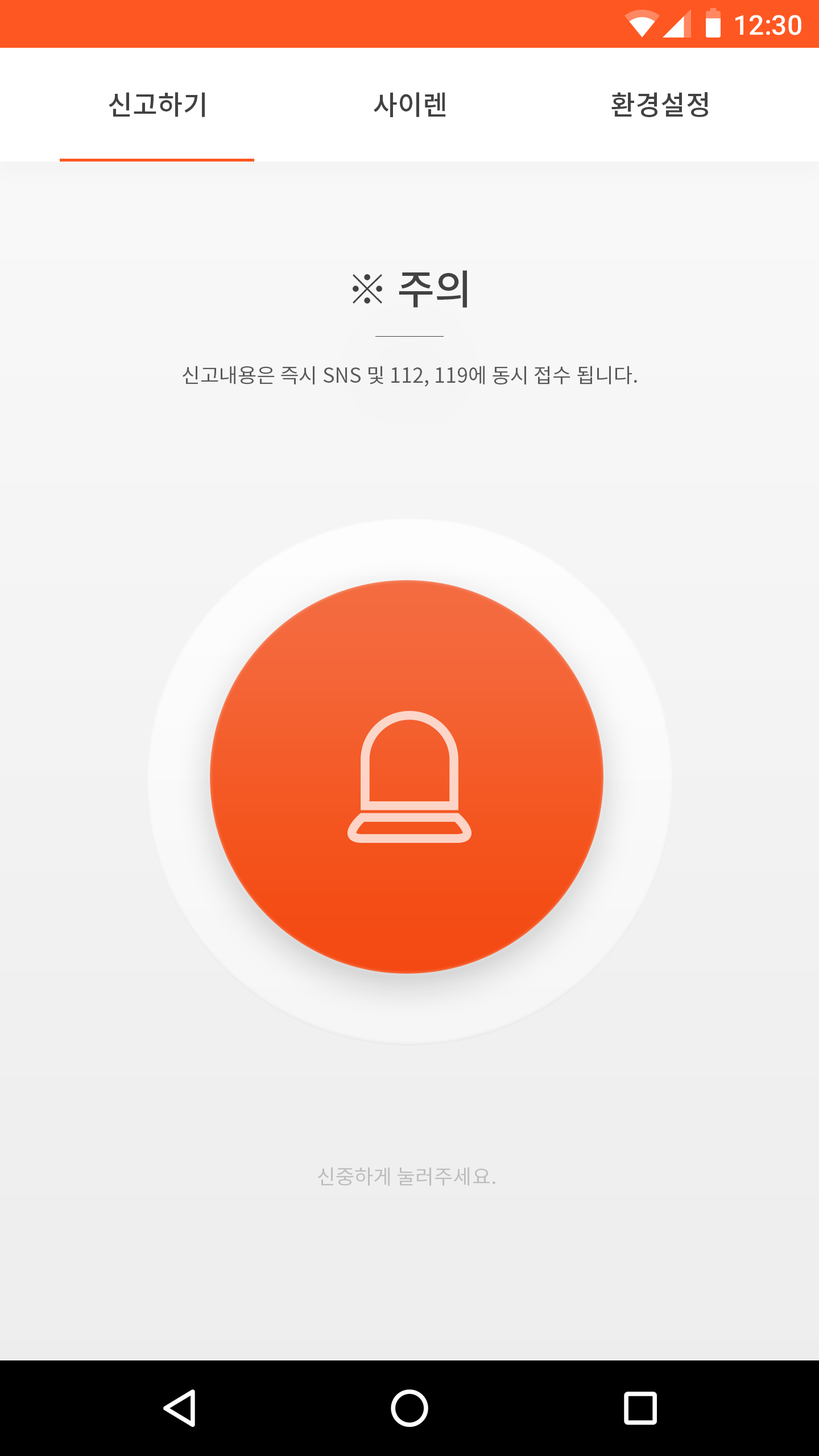
<style>
.page{position:relative;width:819px;height:1456px}
.page>*{position:absolute;margin:0}
.t1{font:27.3px "Roboto-Medium";color:#ffffff}
.t2{font:27.3px "NotoSansCJKkr-Medium";color:#424242}
.t3{font:40.9px "NotoSansCJKkr-Medium";color:#424242}
.t4{font:20.5px "NotoSansCJKkr-Regular";color:#5b5b5b}
.t5{font:20.5px "NotoSansCJKkr-Regular";color:#bdbdbd}
</style>
<div class="page">
<p class="t1" style="left:735px;top:15px;width:66px;height:20px">12:30</p>
<p class="t2" style="left:109px;top:92px;width:96px;height:25px">신고하기</p>
<p class="t2" style="left:374px;top:92px;width:72px;height:25px">사이렌</p>
<p class="t2" style="left:611px;top:92px;width:97px;height:25px">환경설정</p>
<p class="t3" style="left:353px;top:270px;width:114px;height:38px">※ 주의</p>
<p class="t4" style="left:183px;top:366px;width:454px;height:21px">신고내용은 즉시 SNS 및 112, 119에 동시 접수 됩니다.</p>
<p class="t5" style="left:318px;top:1167px;width:177px;height:19px">신중하게 눌러주세요.</p>
</div>
